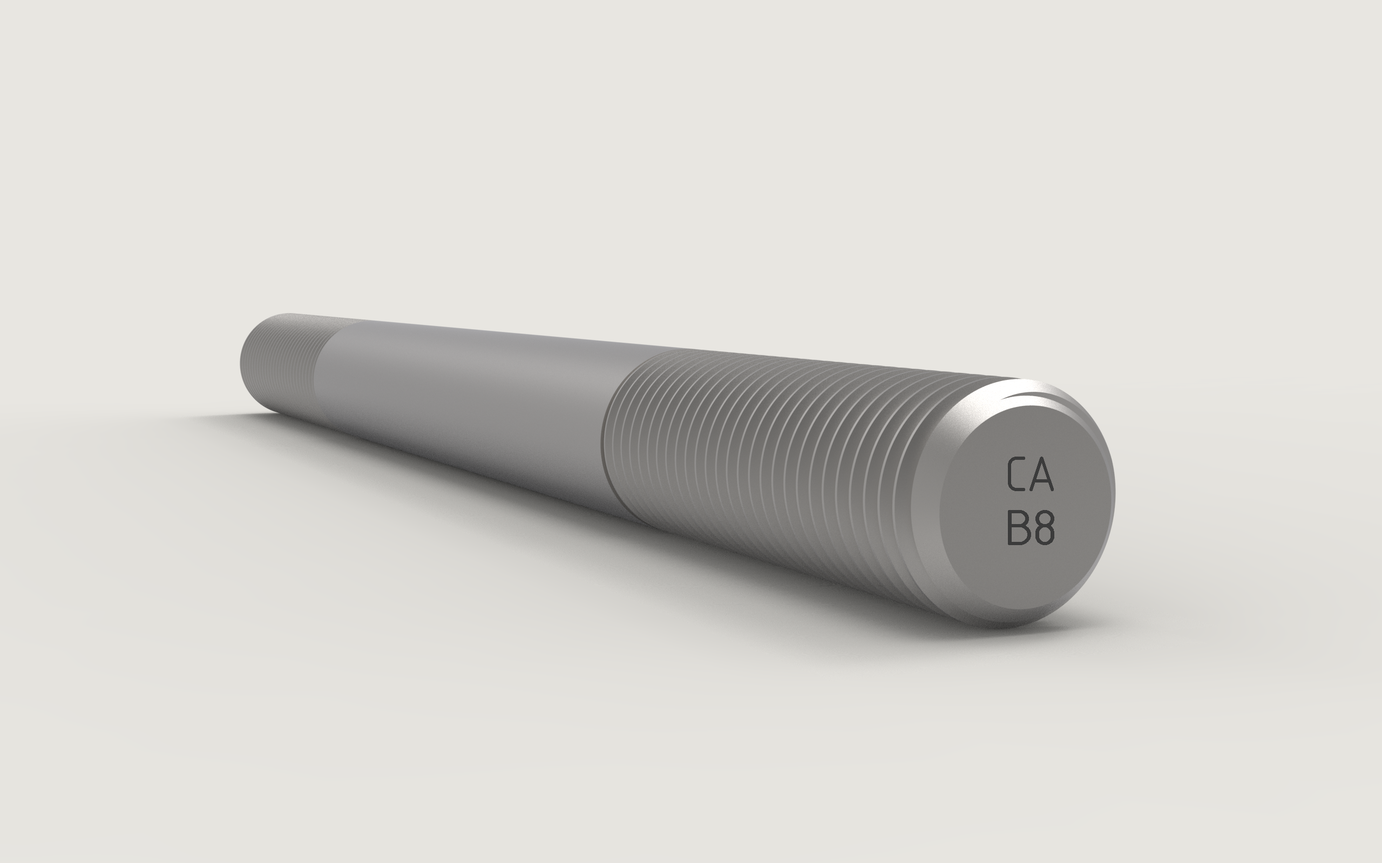
<style>
.page{position:relative;width:1382px;height:863px;background:#e8e6e1}
.page>*{position:absolute;margin:0}
.t1{font:54px/54px "ISOCPEUR";letter-spacing:-0.05em;color:#3b3b3b}
.t2{font:54px/54px "ISOCPEUR";letter-spacing:-0.05em;color:#3b3b3b;scale:1.1 1}
</style>
<div class="page">
<p class="t1" style="left:1008px;top:457px;width:46px;height:88px;text-align:center">CA<br><span class="t2">B8</span></p>
</div>
